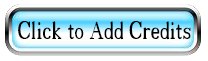
<style>
.page{position:relative;width:208px;height:61px;background:#ffffff}
.page>*{position:absolute;margin:0}
.t1{font:35.6px "18thCentury";color:#000000;scale:0.7 1}
</style>
<div class="page">
<p class="t1" style="left:18px;top:21px;width:173px;height:19px">Click to Add Credits</p>
</div>
